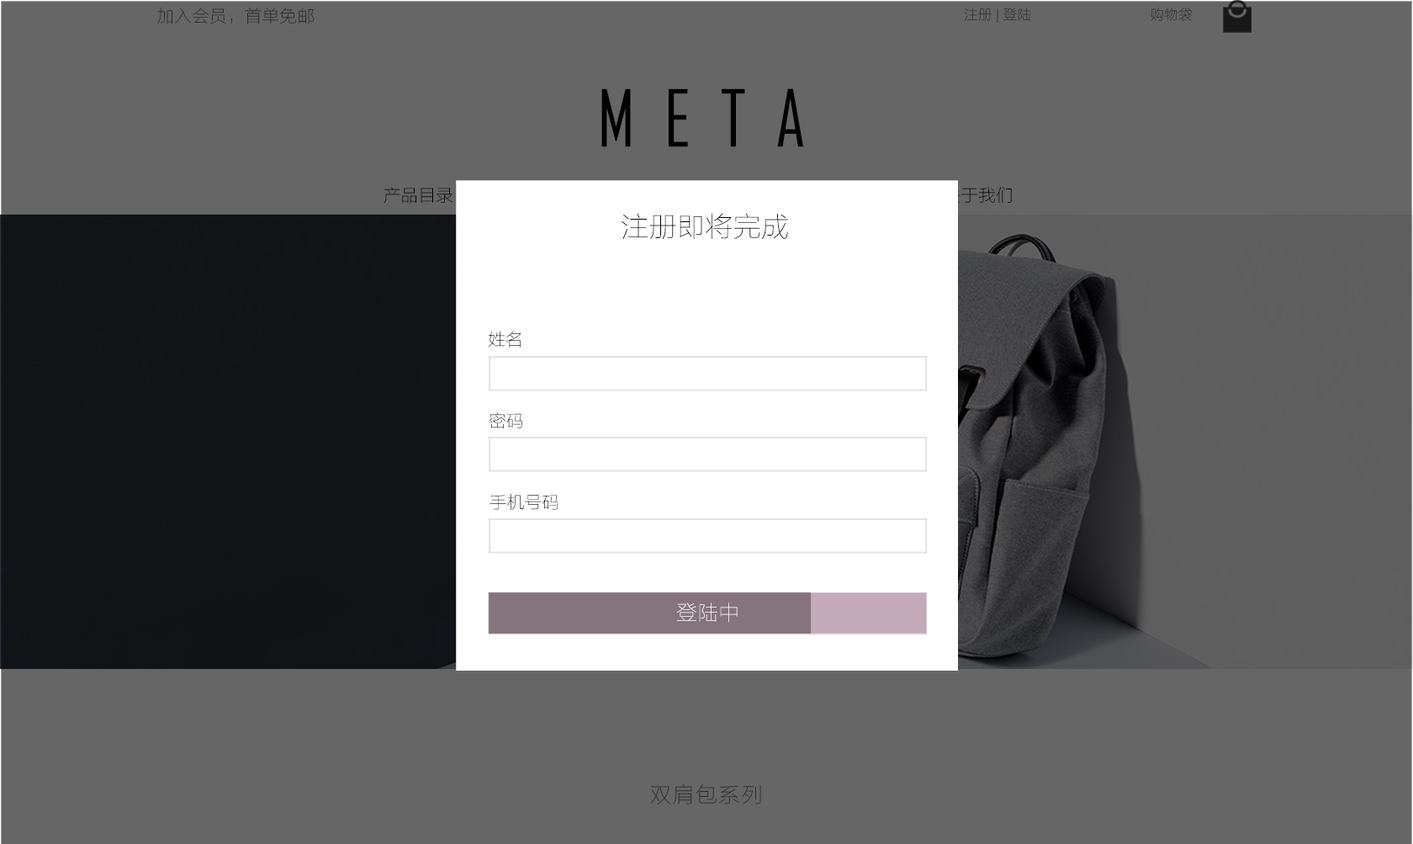
<style>
.page{position:relative;width:1413px;height:844px;background:#666666}
.page>*{position:absolute;margin:0}
.t1{font:17.5px "FZLTCXHJW--GB1-0";color:#292929}
.t2{font:14px "FZLTCXHJW--GB1-0";color:#292929}
.t3{font:14.2px "ArialMT";color:#292929}
.t4{font:75px "AgencyFB-Reg";color:#000000}
.t5{font:28px "FZLTCXHJW--GB1-0";color:#000000}
.t6{font:17.5px "FZLTCXHJW--GB1-0";color:#000000}
.t7{font:17.5px "FZLTCXHJW--GB1-0";color:#232323}
.t8{font:21px "FZLTCXHJW--GB1-0";color:#ffffff}
.t9{font:21.4px "FZLTCXHJW--GB1-0";letter-spacing:0.075em;color:#292929}
</style>
<div class="page">
<p class="t1" style="left:157px;top:8px;width:158px;height:16px">加入会员，首单免邮</p>
<p class="t2" style="left:964px;top:8px;width:228px;height:15px"><span class="t3"> </span>注册 | 登陆                           购物袋</p>
<p class="t4" style="left:601px;top:88px;width:202px;height:59px">M  E  T  A</p>
<p class="t5" style="left:622px;top:213px;width:166px;height:26px">注册即将完成</p>
<p class="t6" style="left:488px;top:331px;width:33px;height:16px">姓名</p>
<p class="t7" style="left:489px;top:412px;width:33px;height:17px">密码</p>
<p class="t6" style="left:490px;top:494px;width:69px;height:16px">手机号码</p>
<p class="t8" style="left:676px;top:602px;width:62px;height:21px">登陆中</p>
<p class="t9" style="left:650px;top:784px;width:111px;height:20px">双肩包系列</p>
</div>
